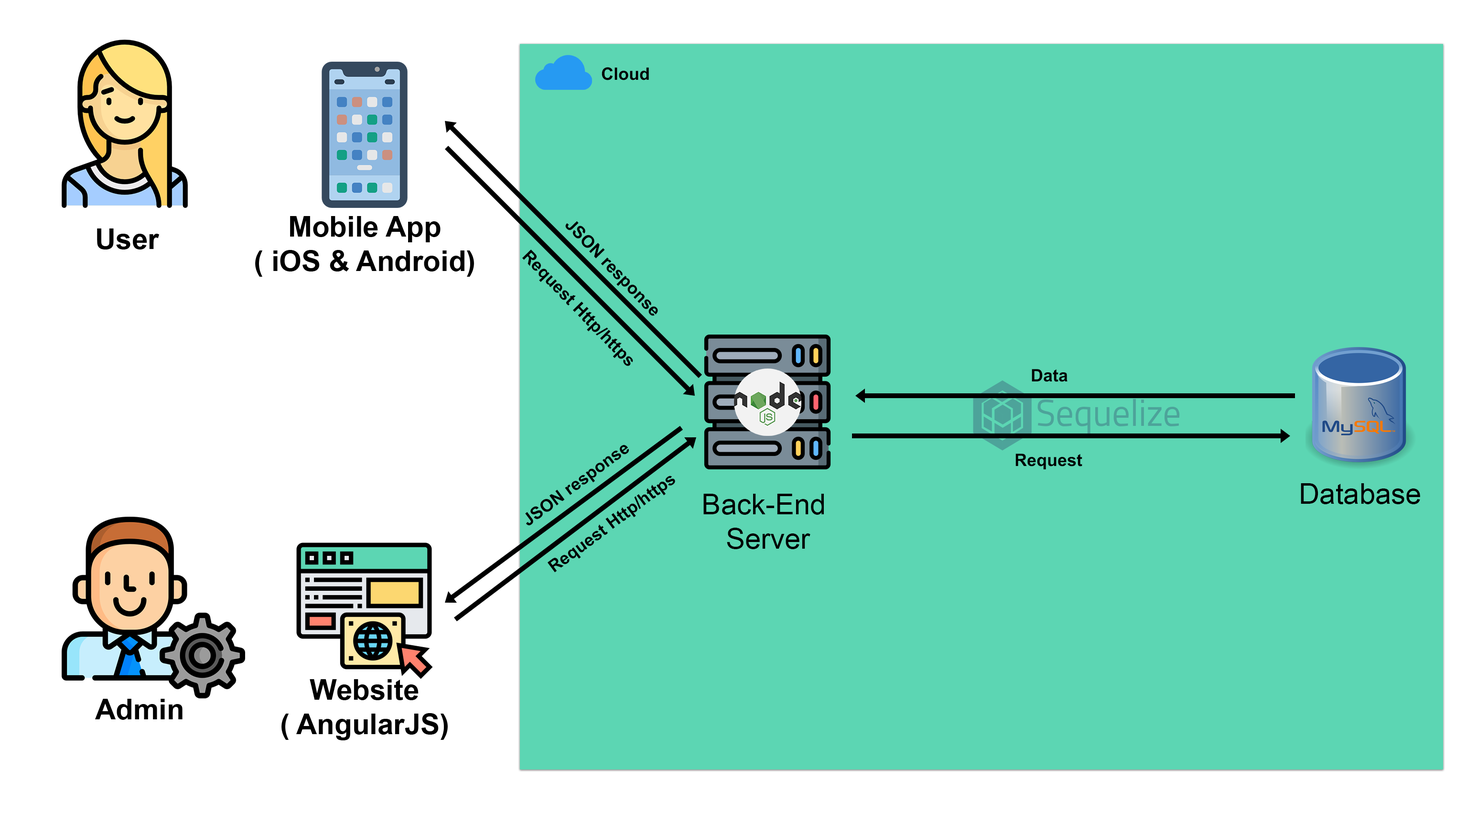
<style>
.page{position:relative;width:1467px;height:813px;background:#5cd6b3}
.page>*{position:absolute;margin:0}
.t1{font:17.2px "Arial-BoldMT";color:#000000}
.t2{font:28.7px "Arial-BoldMT";color:#000000}
.t3{font:28.7px "ArialMT";color:#000000}
</style>
<div class="page">
<p class="t1" style="left:602px;top:67px;width:47px;height:13px">Cloud</p>
<p class="t2" style="left:255px;top:216px;width:219px;height:61px;text-align:center">Mobile App<br>( iOS &amp; Android)</p>
<p class="t1" style="left:565px;top:221px;width:93px;height:95px;rotate:46deg">JSON response</p>
<p class="t2" style="left:97px;top:228px;width:62px;height:21px">User</p>
<p class="t1" style="left:522px;top:249px;width:111px;height:117px;rotate:46deg">Request Http/https</p>
<p class="t1" style="left:1032px;top:369px;width:36px;height:13px">Data</p>
<p class="t1" style="left:525px;top:445px;width:104px;height:81px;rotate:-37deg">JSON response</p>
<p class="t1" style="left:1015px;top:453px;width:67px;height:16px">Request</p>
<p class="t1" style="left:547px;top:475px;width:128px;height:97px;rotate:-37deg">Request Http/https</p>
<p class="t3" style="left:1301px;top:483px;width:119px;height:21px">Database</p>
<p class="t3" style="left:703px;top:494px;width:121px;height:55px;text-align:center">Back-End <br>Server</p>
<p class="t2" style="left:281px;top:679px;width:167px;height:61px;text-align:center">Website<br>( AngularJS)</p>
<p class="t2" style="left:95px;top:699px;width:88px;height:21px">Admin</p>
</div>
